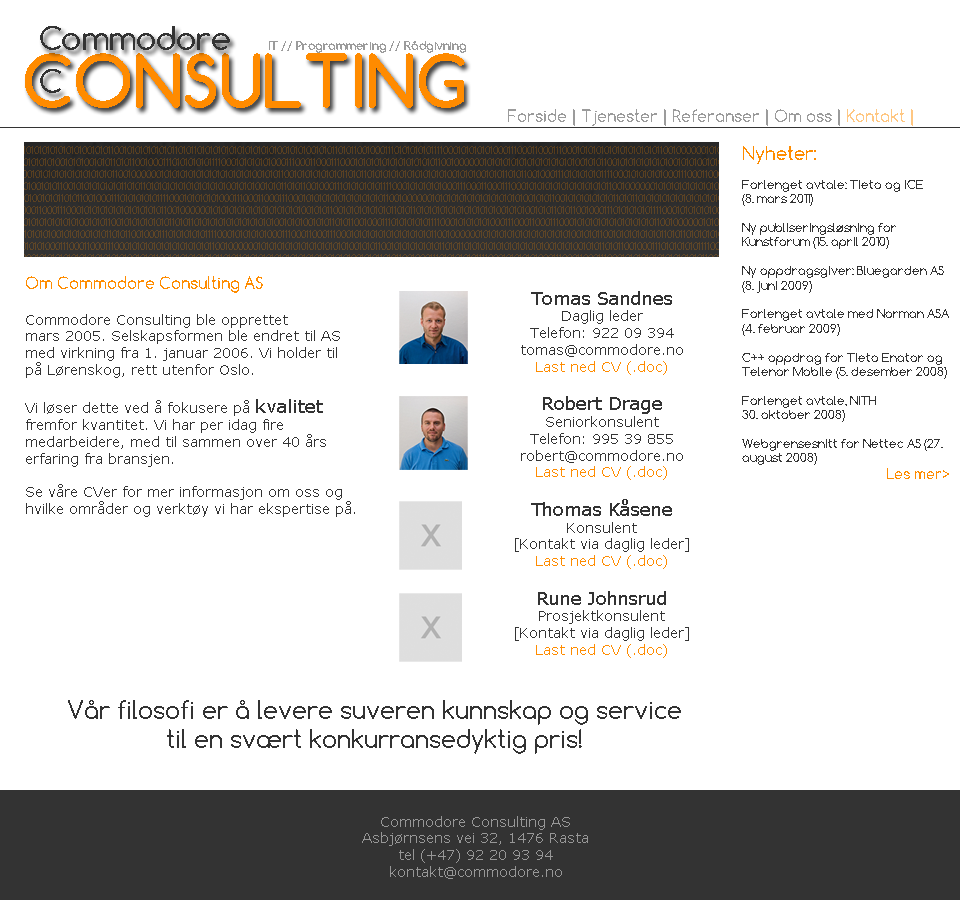
<style>
.page{position:relative;width:960px;height:900px;background:#ffffff}
.page>*{position:absolute;margin:0}
.t1{font:16px "Comfortaa";color:#9b9b9b}
.t2{font:12px "Comfortaa";color:#333333}
.t3{font:18px "Comfortaa";color:#ff8c00}
.t4{font:14px "Comfortaa";color:#ff8c00}
.t5{font:14px "Verdana";color:#333333}
.t6{font:16px "Comfortaa";color:#ff8c00}
.t7{font:18px "Verdana";color:#333333}
.t8{font:14px "Verdana";color:#ff8c00}
.t9{font:24px "Comfortaa";color:#333333}
.t10{font:14px "Verdana";color:#979797}
</style>
<div class="page">
<p class="t1" style="left:508px;top:109px;width:405px;height:17px">Forside | Tjenester | Referanser | Om oss | Kontakt |</p>
<p class="t2" style="left:742px;top:146px;width:207px;height:333px"><span class="t3">Nyheter:<br></span><br>Forlenget avtale: Tieto og ICE <br>(8. mars 2011)<br><br>Ny publiseringsløsning for <br>Kunstforum (15. april 2010)<br><br>Ny oppdragsgiver: Bluegarden AS (8. juni 2009)<br><br>Forlenget avtale med Norman ASA (4. februar 2009)<br><br>C++ oppdrag for Tieto Enator og Telenor Mobile (5. desember 2008)<br><br>Forlenget avtale, NITH <br>30. oktober 2008)<br><br>Webgrensesnitt for Nettec AS (27. august 2008)<br>    <span class="t4">Les mer&gt;</span></p>
<p class="t5" style="left:25px;top:276px;width:330px;height:241px"><span class="t6">Om Commodore Consulting AS<br><br></span>Commodore Consulting ble opprettet <br>mars 2005. Selskapsformen ble endret til AS <br>med virkning fra 1. januar 2006. Vi holder til <br>på Lørenskog, rett utenfor Oslo.<br><br>Vi løser dette ved å fokusere på <span class="t7">kvalitet</span> <br>fremfor kvantitet. Vi har per idag fire <br>medarbeidere, med til sammen over 40 års <br>erfaring fra bransjen. <br><br>Se våre CVer for mer informasjon om oss og <br>hvilke områder og verktøy vi har ekspertise på.</p>
<p class="t5" style="left:515px;top:291px;width:174px;height:367px;text-align:center"><span class="t7">Tomas Sandnes<br></span>Daglig leder<br>Telefon: 922 09 394<br>tomas@commodore.no<br><span class="t8">Last ned CV (.doc)<br><br></span><span class="t7">Robert Drage<br></span>Seniorkonsulent<br>Telefon: 995 39 855<br>robert@commodore.no<br><span class="t8">Last ned CV (.doc)<br><br></span><span class="t7">Thomas Kåsene<br></span>Konsulent<br>[Kontakt via daglig leder]<br><span class="t8">Last ned CV (.doc)<br><br></span><span class="t7">Rune Johnsrud<br></span>Prosjektkonsulent<br>[Kontakt via daglig leder]<br><span class="t8">Last ned CV (.doc)</span></p>
<p class="t9" style="left:68px;top:700px;width:613px;height:54px;text-align:center">Vår filosofi er å levere suveren kunnskap og service <br>til en svært konkurransedyktig pris!</p>
<p class="t10" style="left:362px;top:816px;width:226px;height:63px;text-align:center">Commodore Consulting AS<br>Asbjørnsens vei 32, 1476 Rasta<br>tel (+47) 92 20 93 94<br>kontakt@commodore.no</p>
</div>
